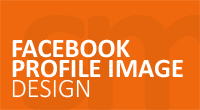
<style>
.page{position:relative;width:200px;height:110px;background:#f0680e}
.page>*{position:absolute;margin:0}
.t1{font:26.6px/20.8px "Calibri-Bold";color:#ffffff}
.t2{font:26.6px "Calibri-Light";color:#ffffff}
</style>
<div class="page">
<p class="t1" style="left:12px;top:39px;width:171px;height:39px">FACEBOOK<br>PROFILE IMAGE</p>
<p class="t2" style="left:12px;top:79px;width:78px;height:19px">DESIGN</p>
</div>
